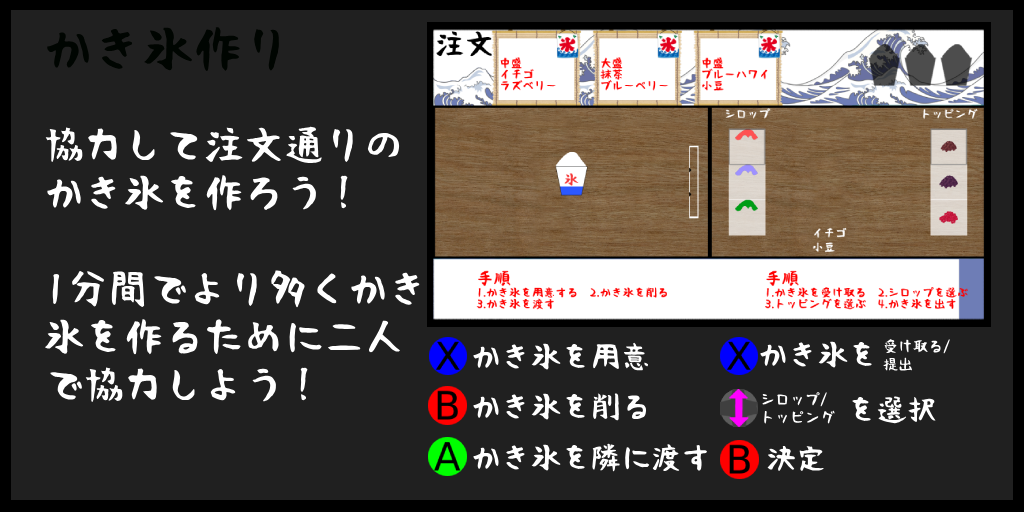
<style>
.page{position:relative;width:1024px;height:512px;background:#202020}
.page>*{position:absolute;margin:0}
.t1{font:50px "RiiTegakiFude";color:#000000}
.t2{font:40px "RiiTegakiFude";color:#ffffff}
.t3{font:30px "RiiTegakiFude";color:#ffffff}
.t4{font:15px "RiiTegakiFude";color:#ffffff}
</style>
<div class="page">
<p class="t1" style="left:47px;top:27px;width:232px;height:44px">かき氷作り</p>
<p class="t2" style="left:44px;top:126px;width:376px;height:277px">協力して注文通りのかき氷を作ろう！<br><br>1分間でより多くかき氷を作るために二人で協力しよう！</p>
<p class="t3" style="left:473px;top:342px;width:176px;height:29px">かき氷を用意</p>
<p class="t3" style="left:760px;top:341px;width:112px;height:27px">かき氷を</p>
<p class="t4" style="left:883px;top:339px;width:67px;height:32px">受け取る/<br>提出</p>
<p class="t3" style="left:473px;top:393px;width:174px;height:28px">かき氷を削る</p>
<p class="t4" style="left:762px;top:392px;width:73px;height:32px">シロップ/<br>トッピング</p>
<p class="t3" style="left:852px;top:396px;width:84px;height:28px">を選択</p>
<p class="t3" style="left:473px;top:443px;width:234px;height:29px">かき氷を隣に渡す</p>
<p class="t3" style="left:767px;top:445px;width:57px;height:26px">決定</p>
</div>
